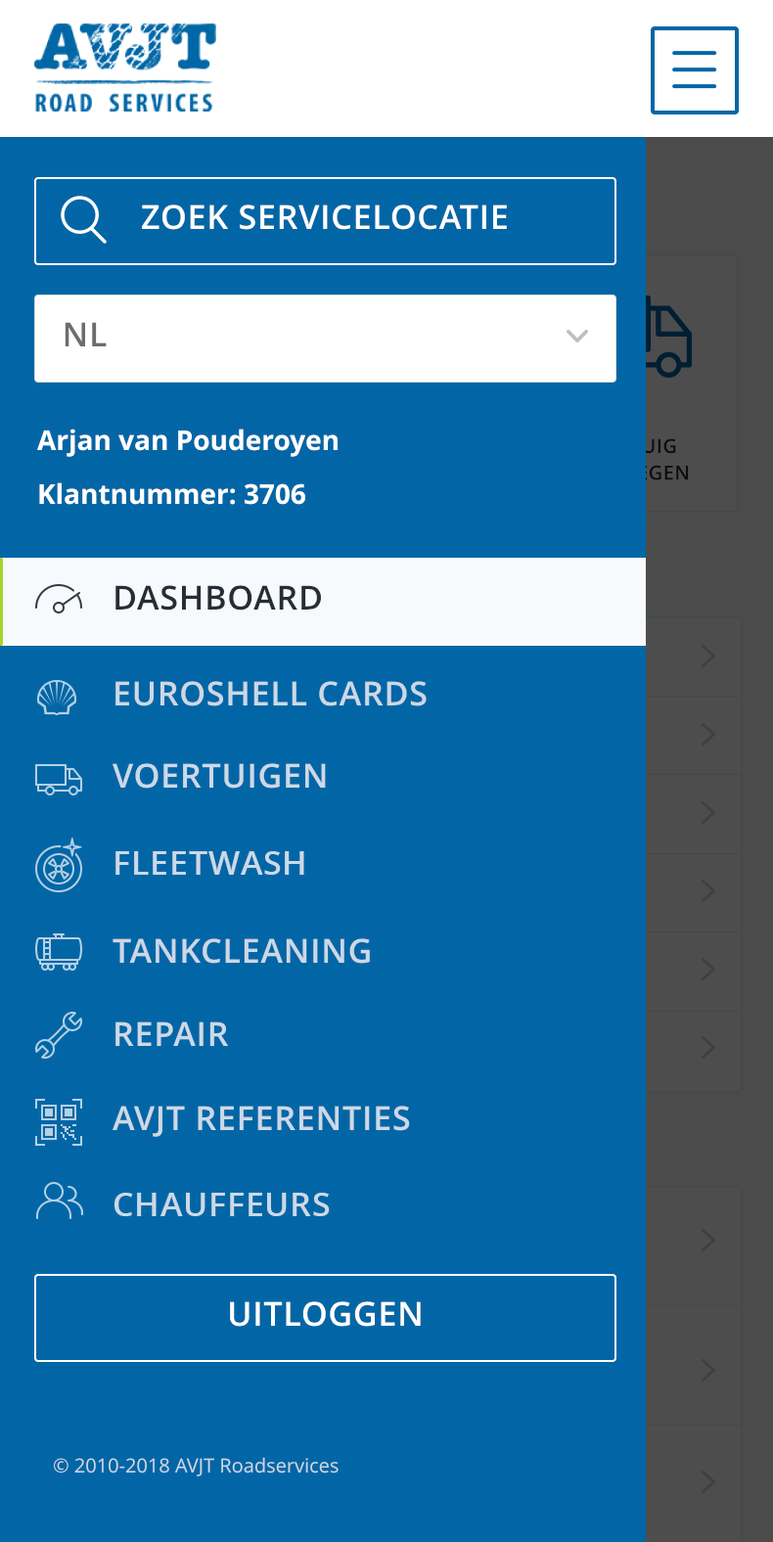
<style>
.page{position:relative;width:773px;height:1542px;background:#0266a6}
.page>*{position:absolute;margin:0}
.t1{font:33.3px "OpenSans-Semibold";letter-spacing:0.023em;color:#ffffff;text-transform:uppercase}
.t2{font:33.3px "OpenSans-Semibold";letter-spacing:0.023em;color:#6d6d6d;text-transform:uppercase}
.t3{font:27.4px "OpenSans-Bold";color:#ffffff}
.t4{font:33.3px "OpenSans-Semibold";letter-spacing:0.023em;color:#262d37;text-transform:uppercase}
.t5{font:33.3px "OpenSans-Semibold";letter-spacing:0.023em;color:#cbd8e6;text-transform:uppercase}
.t6{font:33.3px "OpenSans-Semibold";letter-spacing:0.023em;color:#cbd9e7;text-transform:uppercase}
.t7{font:19.6px "OpenSans";color:#cbd8e6}
</style>
<div class="page">
<p class="t1" style="left:142px;top:205px;width:365px;height:25px">zoek servicelocatie</p>
<p class="t2" style="left:65px;top:322px;width:42px;height:24px">NL</p>
<p class="t3" style="left:37px;top:429px;width:301px;height:28px">Arjan van Pouderoyen</p>
<p class="t3" style="left:39px;top:482px;width:266px;height:23px">Klantnummer: 3706</p>
<p class="t4" style="left:115px;top:585px;width:206px;height:26px">dashboard</p>
<p class="t5" style="left:115px;top:681px;width:312px;height:26px">EuroShell Cards</p>
<p class="t6" style="left:113px;top:763px;width:213px;height:26px">voertuigen</p>
<p class="t6" style="left:115px;top:851px;width:189px;height:24px">fleetwash</p>
<p class="t5" style="left:113px;top:939px;width:257px;height:25px">tankcleaning</p>
<p class="t6" style="left:115px;top:1022px;width:114px;height:24px">repair</p>
<p class="t6" style="left:113px;top:1106px;width:297px;height:31px">avjt referenties</p>
<p class="t6" style="left:115px;top:1193px;width:215px;height:23px">chauffeurs</p>
<p class="t1" style="left:230px;top:1302px;width:191px;height:25px">uitloggen</p>
<p class="t7" style="left:53px;top:1457px;width:286px;height:20px">© 2010-2018 AVJT Roadservices</p>
</div>
